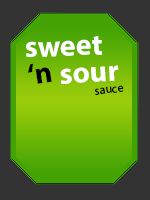
<style>
.page{position:relative;width:150px;height:200px;background:#333333}
.page>*{position:absolute;margin:0}
.t1{font:30px "MyriadPro-Bold";color:#ffffff}
.t2{font:30px "MyriadPro-Bold";color:#000000}
.t3{font:12px "MyriadPro-Regular";color:#000000}
</style>
<div class="page">
<p class="t1" style="left:26px;top:36px;width:76px;height:21px;rotate:-2deg">sweet</p>
<p class="t2" style="left:28px;top:63px;width:24px;height:21px;rotate:-8deg">‘n</p>
<p class="t1" style="left:60px;top:65px;width:59px;height:19px;rotate:-3deg">sour</p>
<p class="t3" style="left:95px;top:85px;width:29px;height:10px;rotate:-7deg">sauce</p>
</div>
